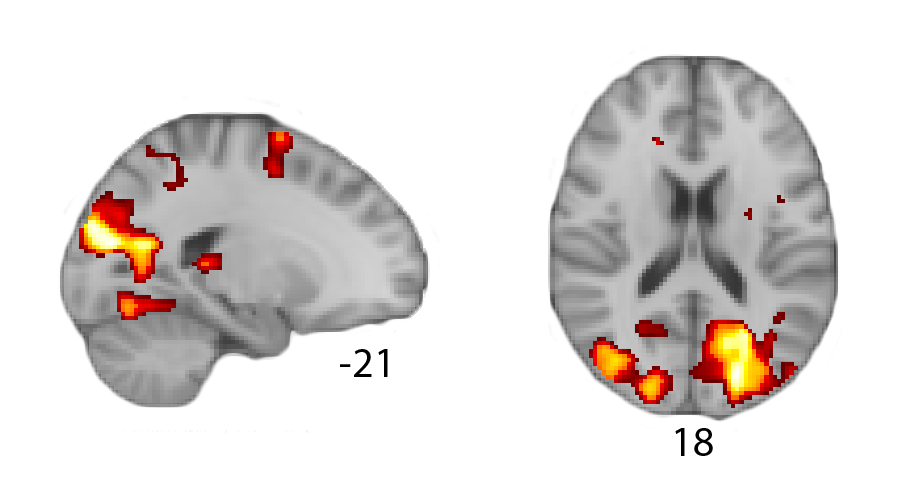
<style>
.page{position:relative;width:898px;height:486px;background:#ffffff}
.page>*{position:absolute;margin:0}
.t1{font:41.7px "MyriadPro-Regular";color:#000000}
</style>
<div class="page">
<p class="t1" style="left:340px;top:349px;width:48px;height:28px">-21</p>
<p class="t1" style="left:675px;top:428px;width:38px;height:28px">18</p>
</div>
